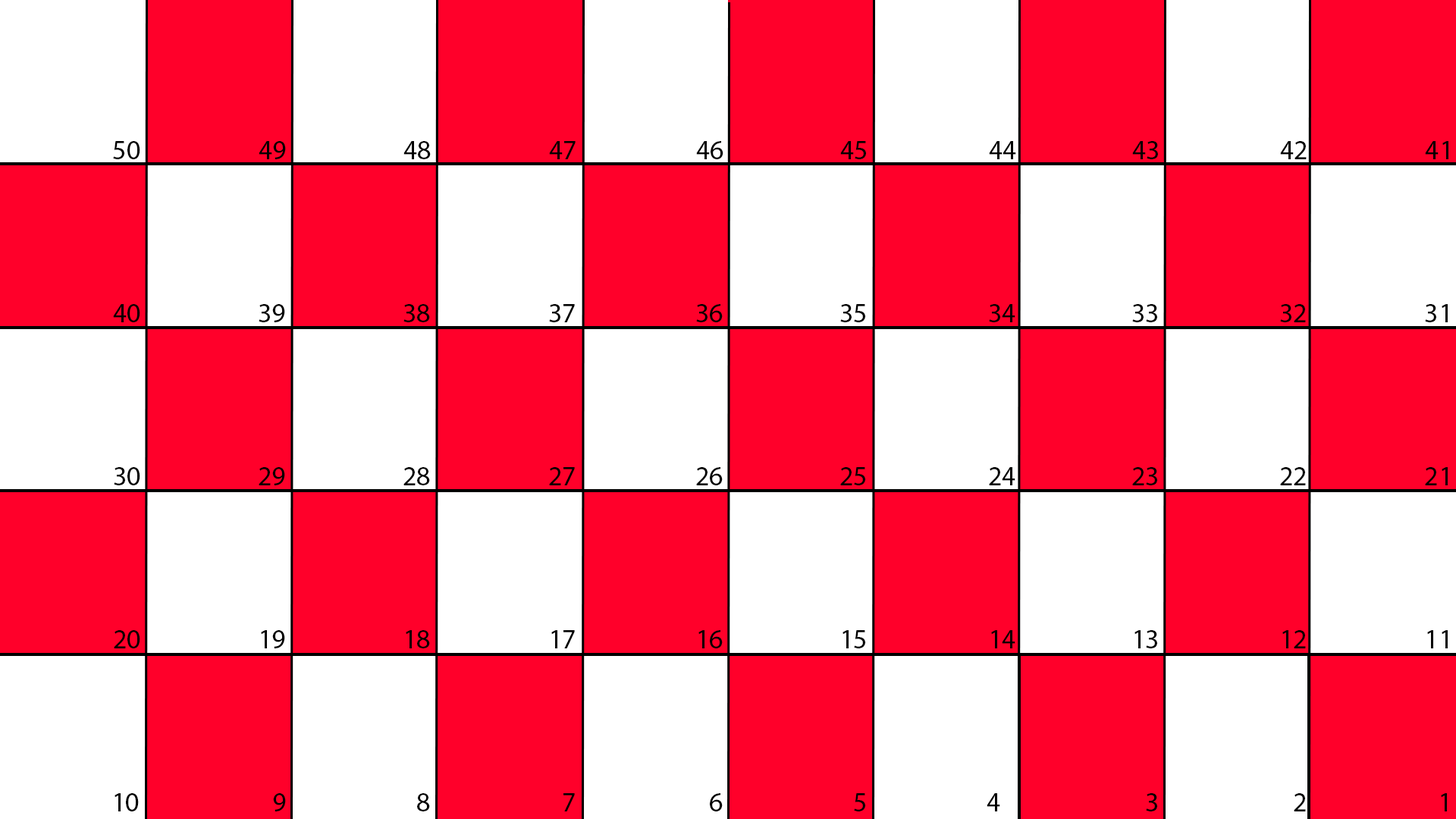
<style>
.page{position:relative;width:1456px;height:819px;background:#ffffff}
.page>*{position:absolute;margin:0}
.t1{font:27.3px "MyriadPro-Regular";color:#000000}
</style>
<div class="page">
<p class="t1" style="left:113px;top:141px;width:27px;height:18px">50</p>
<p class="t1" style="left:259px;top:141px;width:27px;height:18px">49</p>
<p class="t1" style="left:403px;top:141px;width:28px;height:18px">48</p>
<p class="t1" style="left:549px;top:141px;width:27px;height:18px">47</p>
<p class="t1" style="left:696px;top:141px;width:27px;height:18px">46</p>
<p class="t1" style="left:840px;top:141px;width:26px;height:18px">45</p>
<p class="t1" style="left:989px;top:141px;width:27px;height:18px">44</p>
<p class="t1" style="left:1132px;top:141px;width:26px;height:18px">43</p>
<p class="t1" style="left:1280px;top:141px;width:27px;height:18px">42</p>
<p class="t1" style="left:1425px;top:141px;width:23px;height:18px">41</p>
<p class="t1" style="left:113px;top:304px;width:27px;height:18px">40</p>
<p class="t1" style="left:259px;top:304px;width:26px;height:18px">39</p>
<p class="t1" style="left:403px;top:304px;width:27px;height:18px">38</p>
<p class="t1" style="left:549px;top:304px;width:26px;height:18px">37</p>
<p class="t1" style="left:696px;top:304px;width:27px;height:18px">36</p>
<p class="t1" style="left:840px;top:304px;width:25px;height:18px">35</p>
<p class="t1" style="left:989px;top:304px;width:26px;height:18px">34</p>
<p class="t1" style="left:1132px;top:304px;width:25px;height:18px">33</p>
<p class="t1" style="left:1280px;top:304px;width:26px;height:18px">32</p>
<p class="t1" style="left:1425px;top:304px;width:23px;height:18px">31</p>
<p class="t1" style="left:114px;top:467px;width:26px;height:18px">30</p>
<p class="t1" style="left:259px;top:467px;width:26px;height:18px">29</p>
<p class="t1" style="left:403px;top:467px;width:27px;height:18px">28</p>
<p class="t1" style="left:549px;top:467px;width:26px;height:18px">27</p>
<p class="t1" style="left:696px;top:467px;width:27px;height:18px">26</p>
<p class="t1" style="left:840px;top:467px;width:25px;height:18px">25</p>
<p class="t1" style="left:989px;top:467px;width:26px;height:18px">24</p>
<p class="t1" style="left:1132px;top:467px;width:25px;height:18px">23</p>
<p class="t1" style="left:1280px;top:467px;width:26px;height:18px">22</p>
<p class="t1" style="left:1425px;top:467px;width:23px;height:18px">21</p>
<p class="t1" style="left:114px;top:630px;width:26px;height:18px">20</p>
<p class="t1" style="left:261px;top:630px;width:24px;height:18px">19</p>
<p class="t1" style="left:406px;top:630px;width:24px;height:18px">18</p>
<p class="t1" style="left:551px;top:630px;width:24px;height:18px">17</p>
<p class="t1" style="left:698px;top:630px;width:25px;height:18px">16</p>
<p class="t1" style="left:842px;top:630px;width:23px;height:18px">15</p>
<p class="t1" style="left:991px;top:630px;width:24px;height:18px">14</p>
<p class="t1" style="left:1134px;top:630px;width:23px;height:18px">13</p>
<p class="t1" style="left:1282px;top:630px;width:24px;height:18px">12</p>
<p class="t1" style="left:1427px;top:630px;width:21px;height:18px">11</p>
<p class="t1" style="left:115px;top:793px;width:24px;height:18px">10</p>
<p class="t1" style="left:273px;top:793px;width:13px;height:18px">9</p>
<p class="t1" style="left:417px;top:793px;width:13px;height:18px">8</p>
<p class="t1" style="left:563px;top:793px;width:12px;height:18px">7</p>
<p class="t1" style="left:710px;top:793px;width:13px;height:18px">6</p>
<p class="t1" style="left:854px;top:793px;width:11px;height:18px">5</p>
<p class="t1" style="left:987px;top:793px;width:13px;height:18px">4</p>
<p class="t1" style="left:1146px;top:793px;width:11px;height:18px">3</p>
<p class="t1" style="left:1441px;top:793px;width:6px;height:18px">1</p>
</div>
